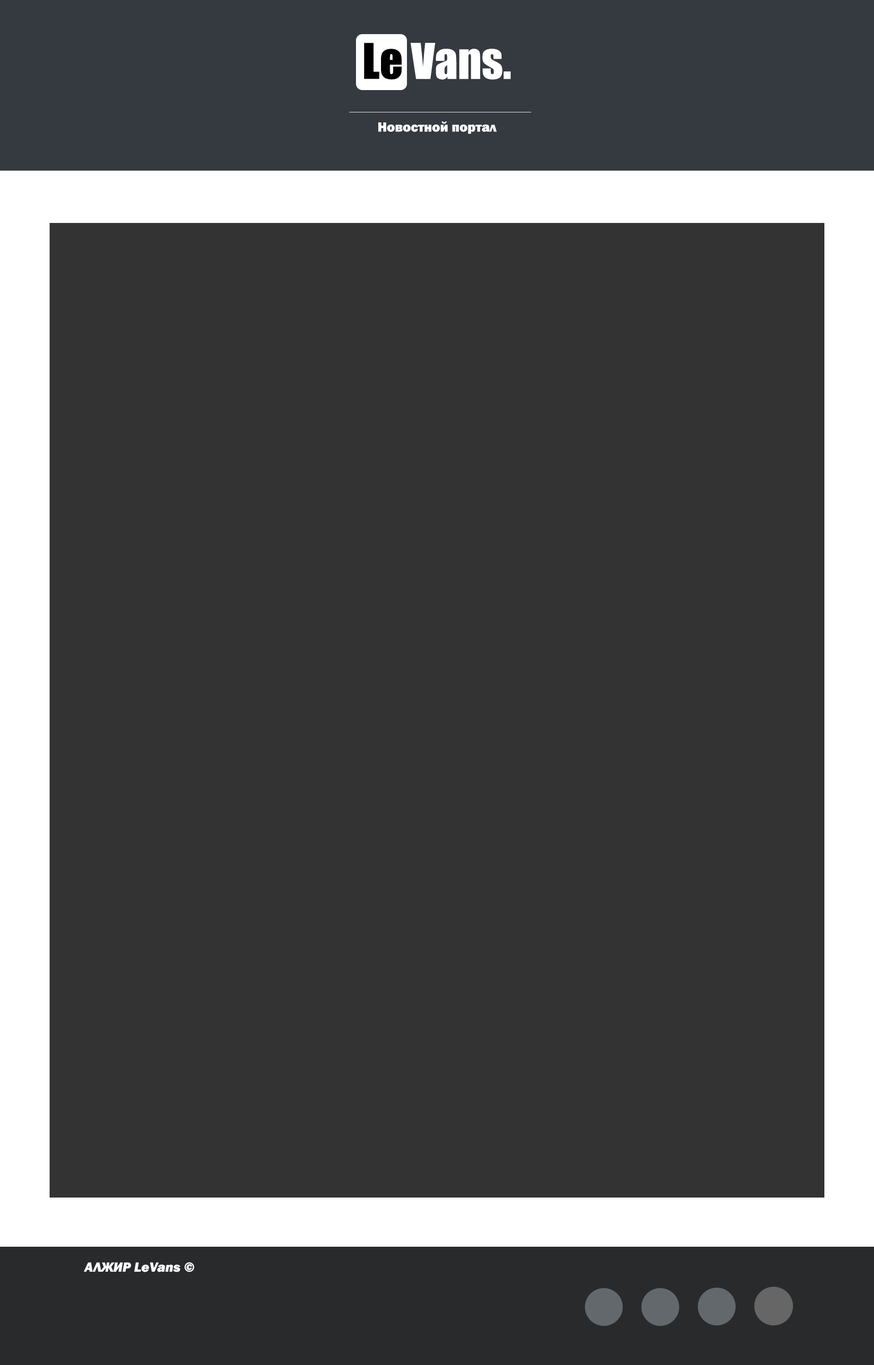
<style>
.page{position:relative;width:874px;height:1365px;background:#333333}
.page>*{position:absolute;margin:0}
.t1{font:13.6px "FranklinGothic-Heavy";color:#ffffff}
.t2{font:13.6px "FranklinGothic-HeavyItalic";color:#ffffff}
</style>
<div class="page">
<p class="t1" style="left:378px;top:121px;width:118px;height:13px">Новостной портал</p>
<p class="t2" style="left:84px;top:1262px;width:110px;height:10px">АЛЖИР LeVans ©</p>
</div>
